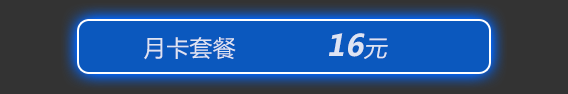
<style>
.page{position:relative;width:568px;height:94px;background:#0b58be}
.page>*{position:absolute;margin:0}
.t1{font:22.8px "MicrosoftYaHei";letter-spacing:0.02em;color:#dee4f3}
.t2{font:29.5px "MicrosoftYaHei-Bold";letter-spacing:0.02em;color:#dee4f3;font-style:italic}
.t3{font:22.8px "MicrosoftYaHei";letter-spacing:0.02em;color:#dee4f3;font-style:italic}
</style>
<div class="page">
<p class="t1" style="left:144px;top:37px;width:92px;height:23px">月卡套餐</p>
<p class="t2" style="left:329px;top:33px;width:59px;height:26px">16<span class="t3">元</span></p>
</div>
